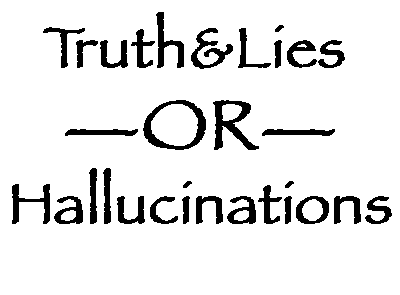
<style>
.page{position:relative;width:400px;height:295px;background:#ffffff}
.page>*{position:absolute;margin:0}
.t1{font:57.8px/36.9px "Papyrus";color:#000000;font-weight:bold}
.t2{font:71.7px/81.7px "Papyrus";color:#000000;font-weight:bold}
</style>
<div class="page">
<p class="t1" style="left:12px;top:12px;width:380px;height:212px">Truth&amp;Lies    <br>  <br><span class="t2">—OR—<br>   <br></span>Hallucinations</p>
</div>
